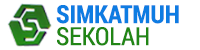
<style>
.page{position:relative;width:200px;height:50px;background:#ffffff}
.page>*{position:absolute;margin:0}
.t1{font:25px "RobotoCondensed-Bold";color:#0e7ce2}
.t2{font:25px "RobotoCondensed-Regular";color:#218615}
</style>
<div class="page">
<p class="t1" style="left:56px;top:5px;width:123px;height:19px">SIMKATMUH</p>
<p class="t2" style="left:57px;top:27px;width:92px;height:19px">SEKOLAH</p>
</div>
